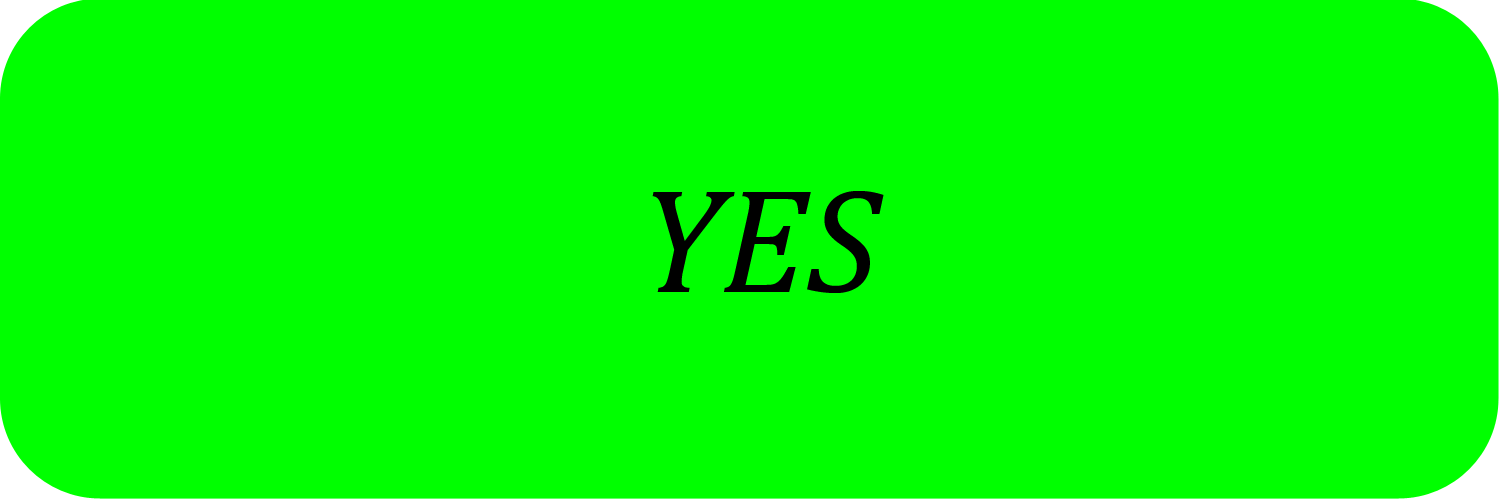
<style>
.page{position:relative;width:1500px;height:500px;background:#00ff00}
.page>*{position:absolute;margin:0}
.t1{font:150px "Cambria-Italic";color:#000000}
</style>
<div class="page">
<p class="t1" style="left:652px;top:191px;width:232px;height:102px">YES</p>
</div>
